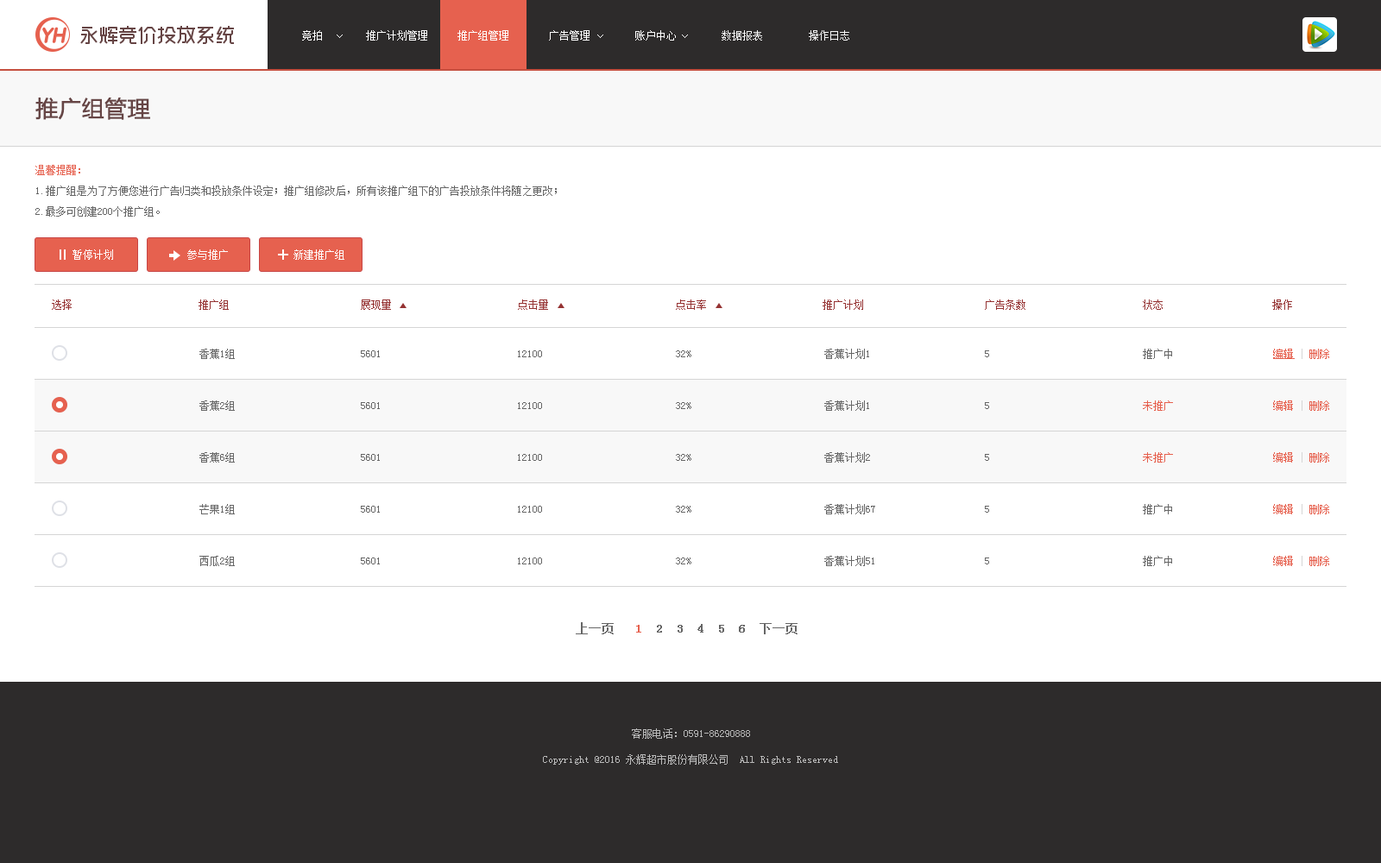
<style>
.page{position:relative;width:1381px;height:863px;background:#ffffff}
.page>*{position:absolute;margin:0}
.t1{font:10.4px "SimSun";color:#ffffff}
.t2{font:10.4px "SimSun";color:#f8f8f8}
.t3{font:22.4px "MicrosoftYaHei";color:#664545;font-weight:bold}
.t4{font:10.4px/20.7px "SimSun";color:#666666}
.t5{font:10.4px/20.7px "SimSun";color:#e6614f}
.t6{font:10.4px "SimSun";color:#953232}
.t7{font:10.4px "SimSun";color:#666666}
.t8{font:10.4px "SimSun";color:#e6614f;text-decoration:underline}
.t9{font:10.4px "SimSun";color:#d5d5d5}
.t10{font:10.4px "SimSun";color:#e6614f}
.t11{font:12.1px "SimSun";color:#666666;font-weight:bold}
.t12{font:12.1px "SimSun";color:#e6614f;font-weight:bold}
.t13{font:10.4px "SimSun";color:#bababa}
</style>
<div class="page">
<p class="t1" style="left:302px;top:30px;width:20px;height:11px">竞拍</p>
<p class="t1" style="left:366px;top:30px;width:61px;height:11px">推广计划管理</p>
<p class="t1" style="left:458px;top:30px;width:50px;height:11px">推广组管理</p>
<p class="t1" style="left:549px;top:30px;width:41px;height:11px">广告管理</p>
<p class="t1" style="left:635px;top:30px;width:41px;height:11px">账户中心</p>
<p class="t2" style="left:722px;top:30px;width:40px;height:11px">数据报表</p>
<p class="t2" style="left:809px;top:30px;width:40px;height:11px">操作日志</p>
<p class="t3" style="left:35px;top:98px;width:115px;height:22px">推广组管理</p>
<p class="t4" style="left:35px;top:165px;width:522px;height:52px"><span class="t5">温馨提醒：<br></span>1.推广组是为了方便您进行广告归类和投放条件设定；推广组修改后，所有该推广组下的广告投放条件将随之更改；<br>2.最多可创建200个推广组。</p>
<p class="t1" style="left:73px;top:249px;width:40px;height:11px">暂停计划</p>
<p class="t1" style="left:187px;top:249px;width:41px;height:11px">参与推广</p>
<p class="t1" style="left:294px;top:249px;width:50px;height:11px">新建推广组</p>
<p class="t6" style="left:52px;top:300px;width:20px;height:10px">选择</p>
<p class="t6" style="left:199px;top:300px;width:30px;height:10px">推广组</p>
<p class="t6" style="left:361px;top:300px;width:30px;height:10px">展现量</p>
<p class="t6" style="left:518px;top:300px;width:30px;height:10px">点击量</p>
<p class="t6" style="left:676px;top:300px;width:30px;height:10px">点击率</p>
<p class="t6" style="left:823px;top:300px;width:40px;height:10px">推广计划</p>
<p class="t6" style="left:985px;top:300px;width:41px;height:10px">广告条数</p>
<p class="t6" style="left:1143px;top:300px;width:20px;height:10px">状态</p>
<p class="t6" style="left:1272px;top:300px;width:20px;height:10px">操作</p>
<p class="t7" style="left:199px;top:349px;width:36px;height:10px">香蕉1组</p>
<p class="t7" style="left:361px;top:350px;width:19px;height:7px">5601</p>
<p class="t7" style="left:518px;top:350px;width:24px;height:7px">12100</p>
<p class="t7" style="left:676px;top:350px;width:15px;height:7px">32%</p>
<p class="t7" style="left:824px;top:349px;width:45px;height:10px">香蕉计划1</p>
<p class="t7" style="left:985px;top:350px;width:4px;height:7px">5</p>
<p class="t7" style="left:1143px;top:349px;width:29px;height:10px">推广中</p>
<p class="t8" style="left:1273px;top:349px;width:56px;height:10px">编辑<span class="t9"> | </span><span class="t10">删除</span></p>
<p class="t7" style="left:199px;top:401px;width:36px;height:10px">香蕉2组</p>
<p class="t7" style="left:824px;top:401px;width:45px;height:10px">香蕉计划1</p>
<p class="t10" style="left:1143px;top:401px;width:30px;height:10px">未推广</p>
<p class="t10" style="left:1273px;top:401px;width:56px;height:10px">编辑<span class="t9"> | </span>删除</p>
<p class="t7" style="left:361px;top:402px;width:19px;height:7px">5601</p>
<p class="t7" style="left:518px;top:402px;width:24px;height:7px">12100</p>
<p class="t7" style="left:676px;top:402px;width:15px;height:7px">32%</p>
<p class="t7" style="left:985px;top:402px;width:4px;height:7px">5</p>
<p class="t7" style="left:199px;top:452px;width:36px;height:11px">香蕉6组</p>
<p class="t7" style="left:361px;top:454px;width:19px;height:7px">5601</p>
<p class="t7" style="left:518px;top:454px;width:24px;height:7px">12100</p>
<p class="t7" style="left:676px;top:454px;width:15px;height:7px">32%</p>
<p class="t7" style="left:824px;top:452px;width:46px;height:11px">香蕉计划2</p>
<p class="t7" style="left:985px;top:454px;width:4px;height:7px">5</p>
<p class="t10" style="left:1143px;top:452px;width:30px;height:11px">未推广</p>
<p class="t10" style="left:1273px;top:452px;width:56px;height:11px">编辑<span class="t9"> | </span>删除</p>
<p class="t7" style="left:199px;top:504px;width:36px;height:11px">芒果1组</p>
<p class="t7" style="left:361px;top:506px;width:19px;height:7px">5601</p>
<p class="t7" style="left:518px;top:506px;width:24px;height:7px">12100</p>
<p class="t7" style="left:676px;top:506px;width:15px;height:7px">32%</p>
<p class="t7" style="left:824px;top:504px;width:51px;height:11px">香蕉计划67</p>
<p class="t7" style="left:985px;top:506px;width:4px;height:7px">5</p>
<p class="t7" style="left:1143px;top:504px;width:29px;height:11px">推广中</p>
<p class="t10" style="left:1273px;top:504px;width:56px;height:11px">编辑<span class="t9"> | </span>删除</p>
<p class="t7" style="left:199px;top:556px;width:36px;height:10px">西瓜2组</p>
<p class="t7" style="left:361px;top:558px;width:19px;height:7px">5601</p>
<p class="t7" style="left:518px;top:558px;width:24px;height:7px">12100</p>
<p class="t7" style="left:676px;top:558px;width:15px;height:7px">32%</p>
<p class="t7" style="left:824px;top:556px;width:51px;height:10px">香蕉计划51</p>
<p class="t7" style="left:985px;top:558px;width:4px;height:7px">5</p>
<p class="t7" style="left:1143px;top:556px;width:29px;height:10px">推广中</p>
<p class="t10" style="left:1273px;top:556px;width:56px;height:10px">编辑<span class="t9"> | </span>删除</p>
<p class="t11" style="left:576px;top:622px;width:222px;height:13px">上一页   <span class="t12">1  </span>2  3  4  5  6  下一页</p>
<p class="t13" style="left:632px;top:729px;width:118px;height:10px">客服电话：0591-86290888</p>
<p class="t13" style="left:543px;top:755px;width:295px;height:10px">Copyright @2016 永辉超市股份有限公司  All Rights Reserved</p>
</div>
